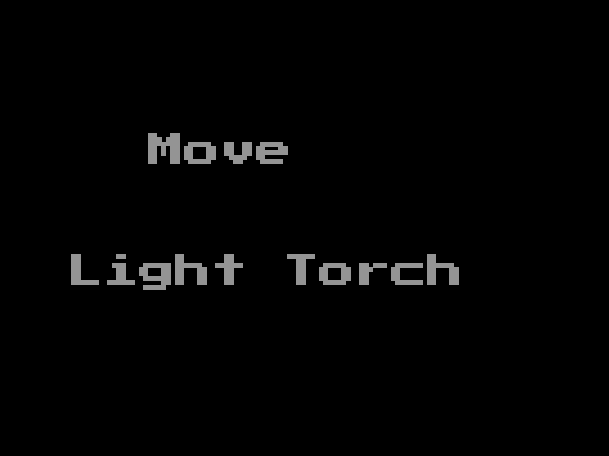
<style>
.page{position:relative;width:609px;height:456px;background:#000000}
.page>*{position:absolute;margin:0}
.t1{font:36px "PressStart2P-Regular";color:#949494}
</style>
<div class="page">
<p class="t1" style="left:148px;top:133px;width:140px;height:31px">Move</p>
<p class="t1" style="left:71px;top:254px;width:388px;height:36px">Light Torch</p>
</div>
